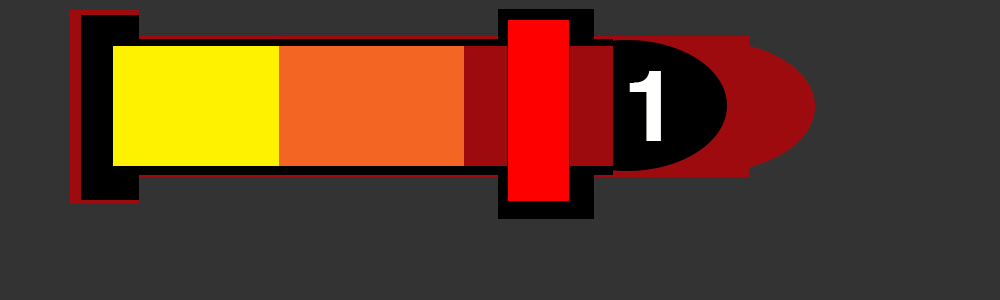
<style>
.page{position:relative;width:1000px;height:300px;background:#333333}
.page>*{position:absolute;margin:0}
.t1{font:100px "Helvetica-Bold";color:#fffffe}
</style>
<div class="page">
<p class="t1" style="left:629px;top:71px;width:32px;height:70px">1</p>
</div>
